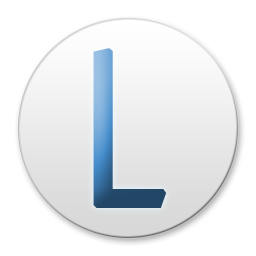
<style>
.page{position:relative;width:256px;height:256px;background:#ffffff}
.page>*{position:absolute;margin:0}
.t1{font:220px "KabelITCbyBT-Book";font-weight:bold}
</style>
<div class="page">
<p class="t1" style="left:93px;top:48px;width:74px;height:160px">L</p>
</div>
